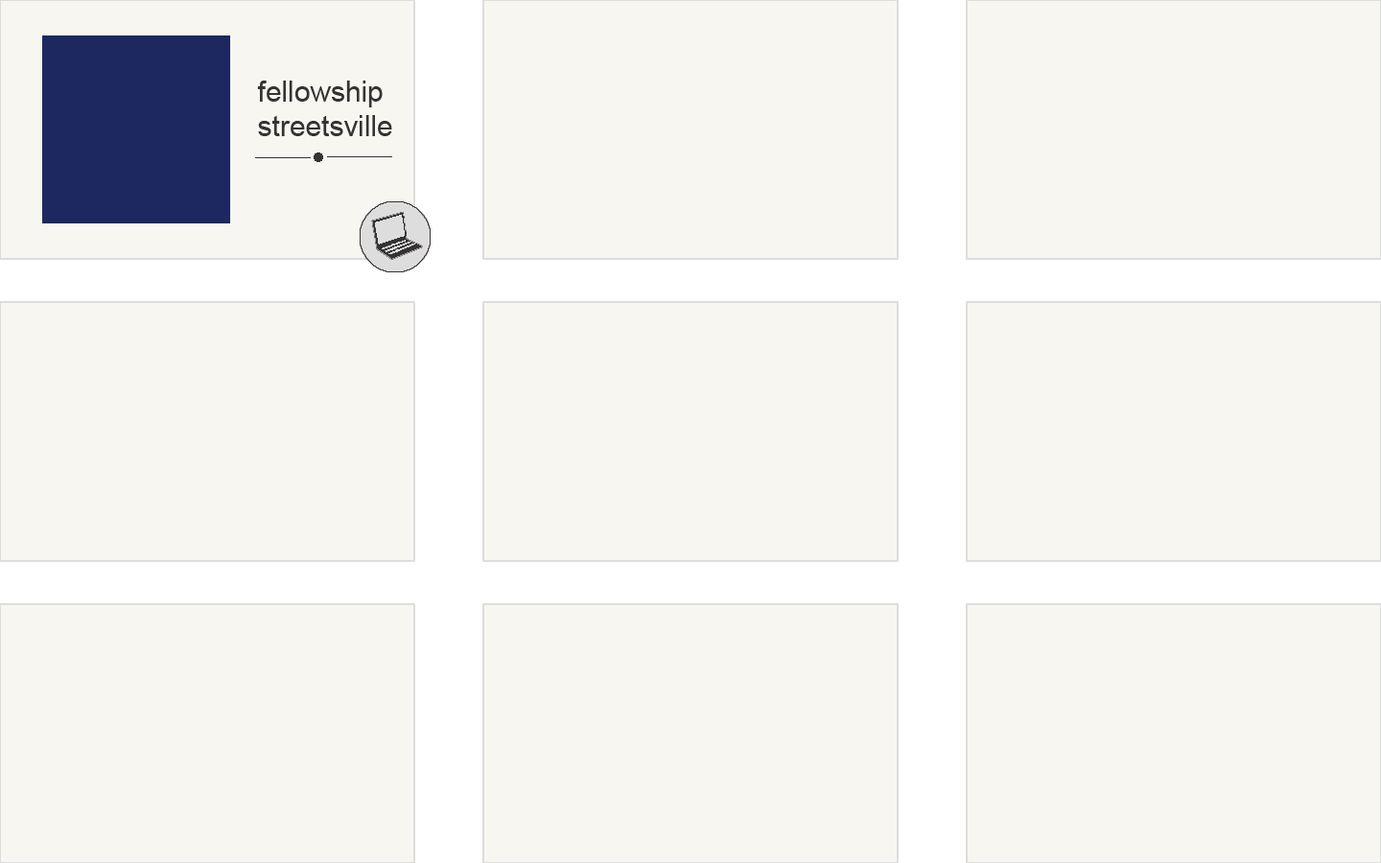
<style>
.page{position:relative;width:1381px;height:863px;background:#f8f6f0}
.page>*{position:absolute;margin:0}
.t1{font:28.6px "ArialMT";color:#333333}
</style>
<div class="page">
<p class="t1" style="left:257px;top:81px;width:135px;height:55px">fellowship<br>streetsville</p>
</div>
